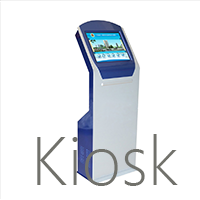
<style>
.page{position:relative;width:200px;height:200px;background:#ffffff}
.page>*{position:absolute;margin:0}
.t1{font:69.4px "SegoeUI-Light";color:#71716b}
</style>
<div class="page">
<p class="t1" style="left:37px;top:134px;width:141px;height:52px">Kiosk</p>
</div>
